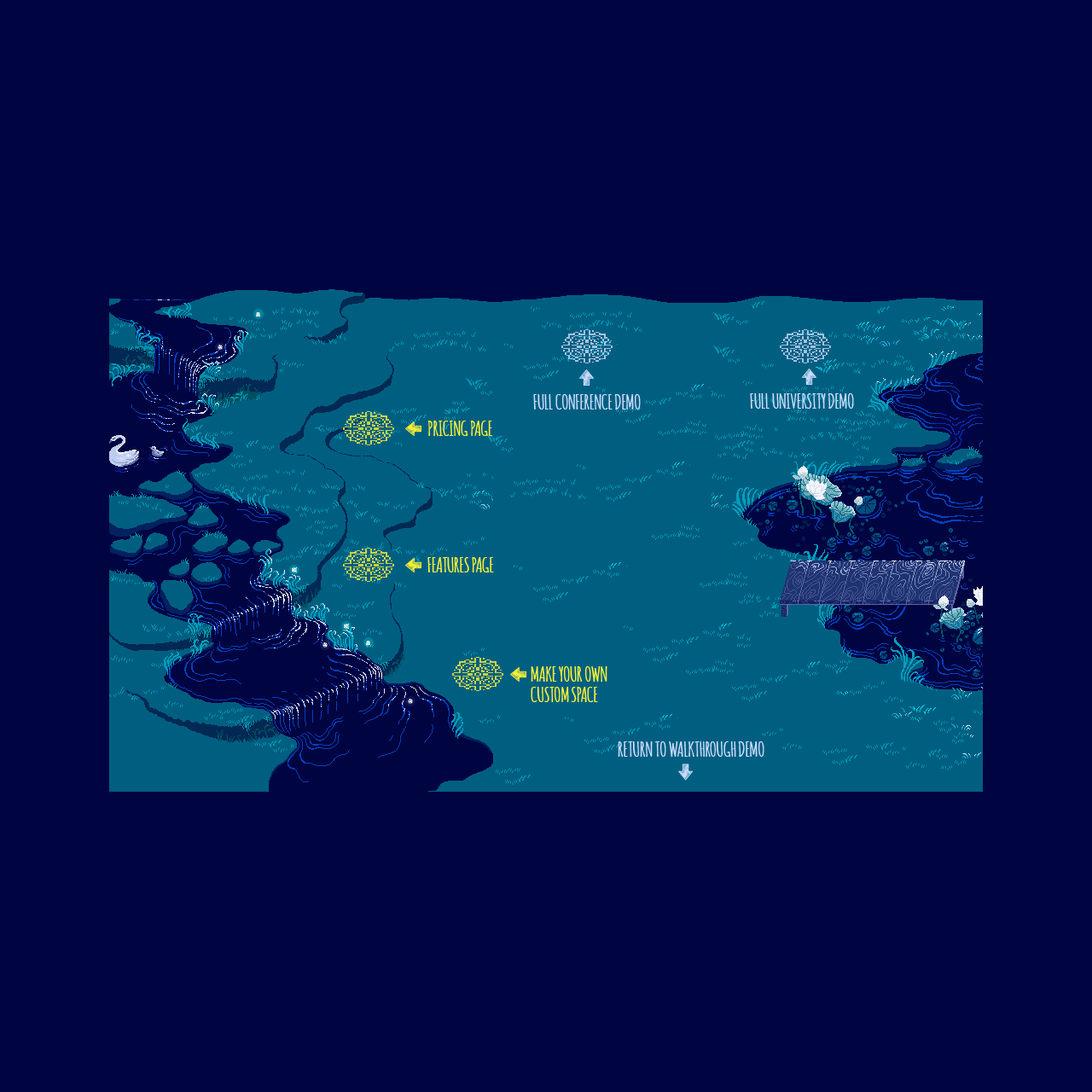
<style>
.page{position:relative;width:1092px;height:1092px;background:#000441}
.page>*{position:absolute;margin:0}
.t1{font:20.5px "Amatic-Bold";color:#cbdbfc}
.t2{font:20.5px "Amatic-Bold";color:#fbf236}
.t3{font:20.5px/20.5px "Amatic-Bold";color:#fbf236}
</style>
<div class="page">
<p class="t1" style="left:533px;top:394px;width:108px;height:15px">FULL CONFERENCE DEMO</p>
<p class="t1" style="left:750px;top:393px;width:104px;height:16px">FULL UNIVERSITY DEMO</p>
<p class="t2" style="left:427px;top:421px;width:66px;height:15px">PRICING PAGE</p>
<p class="t2" style="left:427px;top:557px;width:67px;height:15px">FEATURES PAGE</p>
<p class="t3" style="left:531px;top:666px;width:76px;height:36px">MAKE YOUR OWN<br>CUSTOM SPACE</p>
<p class="t1" style="left:618px;top:741px;width:146px;height:16px">RETURN TO WALKTHROUGH DEMO</p>
</div>
